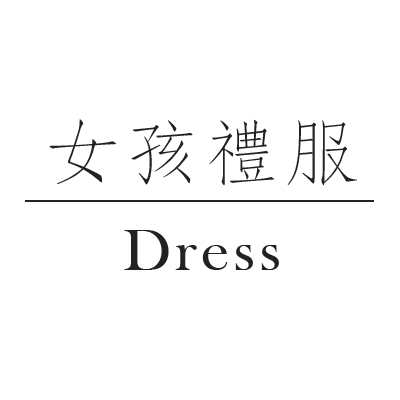
<style>
.page{position:relative;width:400px;height:400px;background:#ffffff}
.page>*{position:absolute;margin:0}
.t1{font:60px/96px "BaskOldFace";letter-spacing:0.06em;color:#232222;scale:1.05 1}
.t2{font:72px/96px "DFFangSong-W2-WIN-BF";letter-spacing:0.06em;color:#232222;scale:1.05 1}
</style>
<div class="page">
<p class="t1" style="left:49px;top:119px;width:308px;height:151px;text-align:center"><span class="t2">女孩禮服<br></span>Dress</p>
</div>
